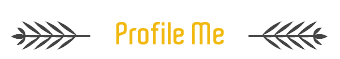
<style>
.page{position:relative;width:340px;height:59px;background:#ffffff}
.page>*{position:absolute;margin:0}
.t1{font:30px "Aldo-SemiBold";color:#f1b90f}
</style>
<div class="page">
<p class="t1" style="left:116px;top:22px;width:108px;height:23px">Profile Me</p>
</div>
